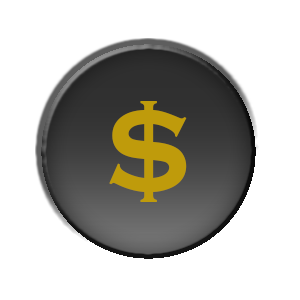
<style>
.page{position:relative;width:300px;height:300px;background:#ffffff}
.page>*{position:absolute;margin:0}
.t1{font:120px "CopperplateGothic-Bold";color:#bf9b0b}
</style>
<div class="page">
<p class="t1" style="left:109px;top:101px;width:78px;height:101px">$</p>
</div>
